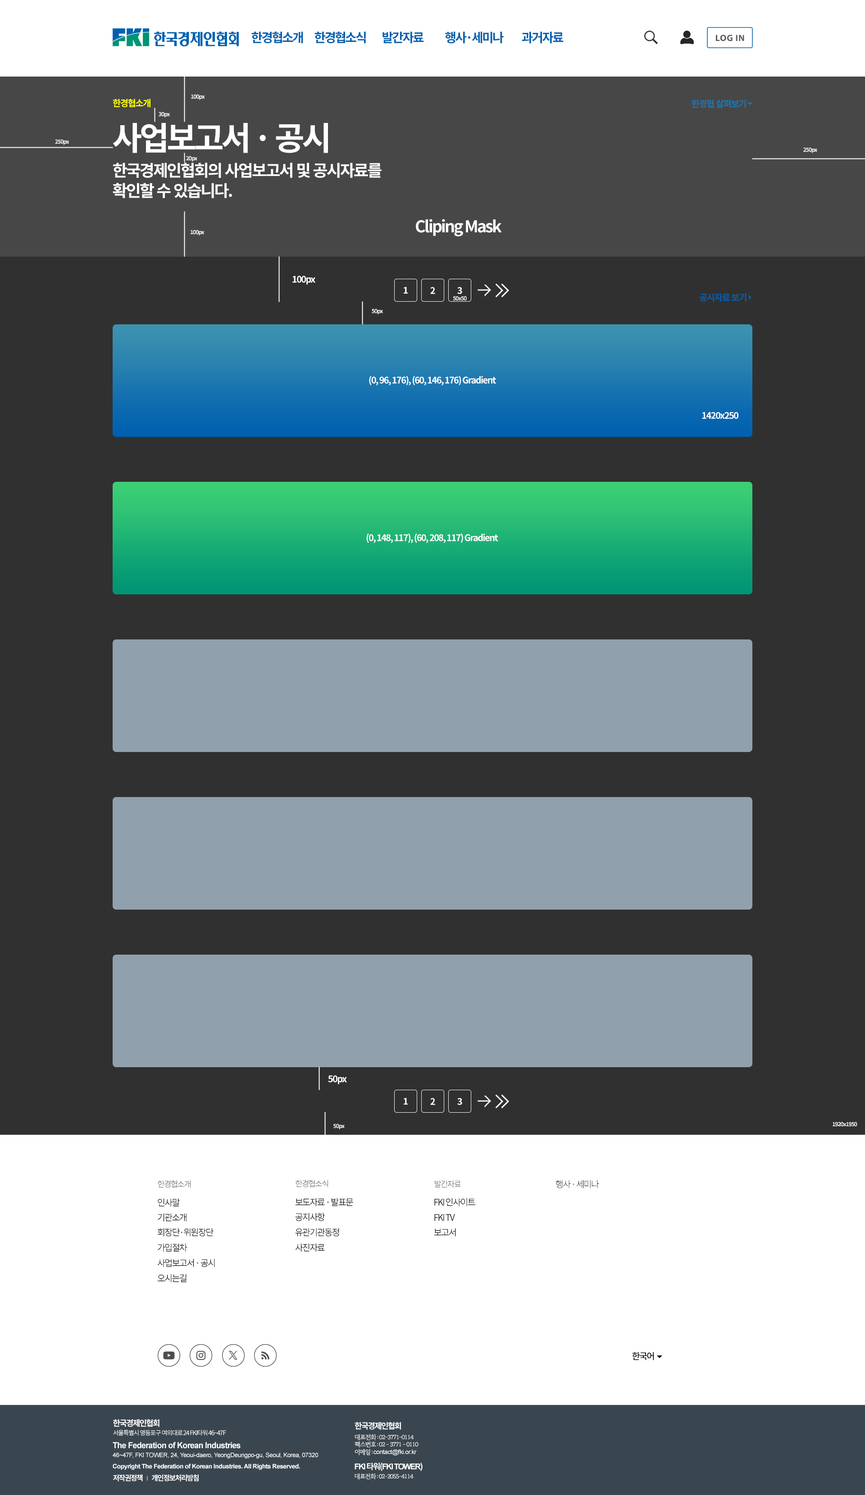
<style>
.page{position:relative;width:865px;height:1495px;background:#303030}
.page>*{position:absolute;margin:0}
.t1{font:12.6px "NotoSansCJKkr-Bold";letter-spacing:-0.1em;color:#0060b0}
.t2{font:9px "MyriadPro-Bold";letter-spacing:0.04em;color:#5a5a5a}
.t3{font:9px "NotoSansCJKkr-Bold";letter-spacing:-0.08em;color:#ffff00}
.t4{font:5.4px "NotoSansCJKkr-Bold";letter-spacing:-0.08em;color:#ffffff}
.t5{font:9px "NotoSansCJKkr-Bold";letter-spacing:-0.08em;color:#1e74b0}
.t6{font:32.4px "NotoSansCJKkr-Bold";letter-spacing:-0.08em;color:#ffffff}
.t7{font:16.2px/20.3px "NotoSansCJKkr-Bold";letter-spacing:-0.08em;color:#ffffff}
.t8{font:16.2px "NotoSansCJKkr-Bold";letter-spacing:-0.08em;color:#ffffff}
.t9{font:9px "NotoSansCJKkr-Bold";letter-spacing:-0.08em;color:#ffffff}
.t10{font:9px "NotoSansCJKkr-Bold";letter-spacing:-0.08em;color:#0060b0}
.t11{font:8.1px "NotoSansCJKkr-Light";letter-spacing:-0.1em;color:#000000}
.t12{font:8.1px "NotoSansCJKkr-Light";letter-spacing:-0.1em}
.t13{font:8.9px "NotoSansCJKkr-Light";letter-spacing:-0.1em;color:#000000}
.t14{font:9px "NotoSansCJKkr-DemiLight";letter-spacing:-0.1em;color:#000000}
.t15{font:9px "NotoSansCJKkr-Medium";letter-spacing:-0.1em;color:#000000}
.t16{font:8.1px "NotoSansCJKkr-Bold";letter-spacing:-0.1em;color:#ffffff}
.t17{font:6.3px "NotoSansCJKkr-Regular";letter-spacing:-0.1em;color:#ffffff}
.t18{font:8.2px "Arial-BoldMT";letter-spacing:-0.04em;color:#ffffff}
.t19{font:6.3px "RIDIBatang";letter-spacing:-0.1em;color:#ffffff}
.t20{font:6.4px "ArialMT";letter-spacing:-0.04em;color:#ffffff}
.t21{font:6.3px "ArialMT";letter-spacing:-0.04em;color:#ffffff}
.t22{font:6.3px "Arial-BoldMT";letter-spacing:-0.04em;color:#ffffff}
.t23{font:8px "Arial-BoldMT";letter-spacing:-0.1em;color:#ffffff}
.t24{font:8px "NotoSansCJKkr-Bold";letter-spacing:-0.1em;color:#ffffff}
.t25{font:7.2px "NotoSansCJKkr-Bold";letter-spacing:-0.1em;color:#ffffff}
.t26{font:6.2px "RIDIBatang";letter-spacing:-0.1em;color:#ffffff}
</style>
<div class="page">
<p class="t1" style="left:251px;top:32px;width:52px;height:11px">한경협소개</p>
<p class="t1" style="left:314px;top:32px;width:52px;height:11px">한경협소식</p>
<p class="t1" style="left:382px;top:32px;width:42px;height:12px">발간자료</p>
<p class="t1" style="left:445px;top:32px;width:58px;height:12px">행사·세미나</p>
<p class="t1" style="left:521px;top:32px;width:42px;height:12px">과거자료</p>
<p class="t2" style="left:716px;top:35px;width:28px;height:6px">LOG IN</p>
<p class="t3" style="left:113px;top:99px;width:37px;height:9px">한경협소개</p>
<p class="t4" style="left:191px;top:94px;width:14px;height:6px">100px</p>
<p class="t5" style="left:691px;top:100px;width:55px;height:8px">한경협 살펴보기</p>
<p class="t4" style="left:159px;top:112px;width:11px;height:6px">30px</p>
<p class="t6" style="left:113px;top:123px;width:215px;height:30px">사업보고서 · 공시</p>
<p class="t4" style="left:55px;top:139px;width:14px;height:6px">250px</p>
<p class="t4" style="left:803px;top:147px;width:14px;height:6px">250px</p>
<p class="t4" style="left:186px;top:156px;width:11px;height:6px">20px</p>
<p class="t7" style="left:113px;top:163px;width:268px;height:35px">한국경제인협회의 사업보고서 및 공시자료를<br>확인할 수 있습니다.</p>
<p class="t8" style="left:416px;top:219px;width:86px;height:17px">Cliping Mask</p>
<p class="t4" style="left:190px;top:230px;width:14px;height:6px">100px</p>
<p class="t9" style="left:292px;top:276px;width:23px;height:9px">100px</p>
<p class="t9" style="left:403px;top:287px;width:5px;height:7px">1</p>
<p class="t9" style="left:430px;top:287px;width:5px;height:7px">2</p>
<p class="t9" style="left:457px;top:287px;width:5px;height:7px">3</p>
<p class="t10" style="left:699px;top:293px;width:47px;height:9px">공시자료 보기</p>
<p class="t4" style="left:453px;top:296px;width:14px;height:5px">50x50</p>
<p class="t4" style="left:372px;top:309px;width:11px;height:5px">50px</p>
<p class="t9" style="left:369px;top:376px;width:127px;height:9px">(0, 96, 176), (60, 146, 176) Gradient</p>
<p class="t9" style="left:702px;top:412px;width:36px;height:7px">1420x250</p>
<p class="t9" style="left:366px;top:533px;width:132px;height:10px">(0, 148, 117), (60, 208, 117) Gradient</p>
<p class="t9" style="left:328px;top:1075px;width:19px;height:9px">50px</p>
<p class="t9" style="left:403px;top:1098px;width:5px;height:7px">1</p>
<p class="t9" style="left:430px;top:1098px;width:5px;height:7px">2</p>
<p class="t9" style="left:457px;top:1098px;width:5px;height:7px">3</p>
<p class="t4" style="left:832px;top:1122px;width:25px;height:5px">1920x1950</p>
<p class="t4" style="left:333px;top:1124px;width:11px;height:5px">50px</p>
<p class="t11" style="left:158px;top:1180px;width:32px;height:8px">한경협소개</p>
<p class="t12" style="left:295px;top:1180px;width:33px;height:7px">한경협소식</p>
<p class="t12" style="left:435px;top:1180px;width:26px;height:8px">발간자료</p>
<p class="t13" style="left:555px;top:1180px;width:44px;height:8px">행사 · 세미나</p>
<p class="t14" style="left:158px;top:1198px;width:22px;height:9px">인사말</p>
<p class="t14" style="left:295px;top:1198px;width:58px;height:8px">보도자료 · 발표문</p>
<p class="t14" style="left:434px;top:1198px;width:41px;height:8px">FKI 인사이트</p>
<p class="t14" style="left:158px;top:1213px;width:28px;height:9px">기관소개</p>
<p class="t14" style="left:295px;top:1213px;width:30px;height:8px">공지사항</p>
<p class="t14" style="left:434px;top:1214px;width:21px;height:7px">FKI TV</p>
<p class="t14" style="left:158px;top:1228px;width:55px;height:9px">회장단·위원장단</p>
<p class="t14" style="left:295px;top:1228px;width:44px;height:9px">유관기관동정</p>
<p class="t14" style="left:434px;top:1228px;width:22px;height:9px">보고서</p>
<p class="t14" style="left:158px;top:1243px;width:29px;height:9px">가입절차</p>
<p class="t14" style="left:295px;top:1243px;width:30px;height:9px">사진자료</p>
<p class="t14" style="left:157px;top:1259px;width:58px;height:8px">사업보고서 · 공시</p>
<p class="t14" style="left:158px;top:1274px;width:28px;height:8px">오시는길</p>
<p class="t15" style="left:632px;top:1352px;width:22px;height:8px">한국어</p>
<p class="t16" style="left:113px;top:1419px;width:46px;height:8px">한국경제인협회</p>
<p class="t17" style="left:113px;top:1430px;width:113px;height:6px">서울특별시 영등포구 여의대로 24 FKI타워 46~47F</p>
<p class="t16" style="left:354px;top:1422px;width:47px;height:8px">한국경제인협회</p>
<p class="t18" style="left:113px;top:1442px;width:127px;height:7px">The Federation of Korean Industries</p>
<p class="t19" style="left:354px;top:1434px;width:60px;height:7px">대표전화 : 02-3771-0114</p>
<p class="t19" style="left:354px;top:1441px;width:64px;height:7px">팩스번호 : 02 - 3771 - 0110</p>
<p class="t20" style="left:113px;top:1452px;width:205px;height:7px">46~47F, FKI TOWER, 24, Yeoui-daero, YeongDeungpo-gu, Seoul, Korea, 07320</p>
<p class="t21" style="left:354px;top:1449px;width:63px;height:6px"><span class="t19">이메일 : </span>contact@fki.or.kr</p>
<p class="t22" style="left:113px;top:1464px;width:187px;height:6px">Copyright The Federation of Korean Industries. All Rights Reserved.</p>
<p class="t23" style="left:354px;top:1463px;width:68px;height:8px">FKI <span class="t24">타워(</span>FKI TOWER<span class="t24">)</span></p>
<p class="t25" style="left:113px;top:1474px;width:30px;height:8px">저작권정책</p>
<p class="t25" style="left:151px;top:1474px;width:48px;height:8px">개인정보처리방침</p>
<p class="t26" style="left:354px;top:1473px;width:59px;height:7px">대표전화 : 02-2055-4114</p>
</div>
